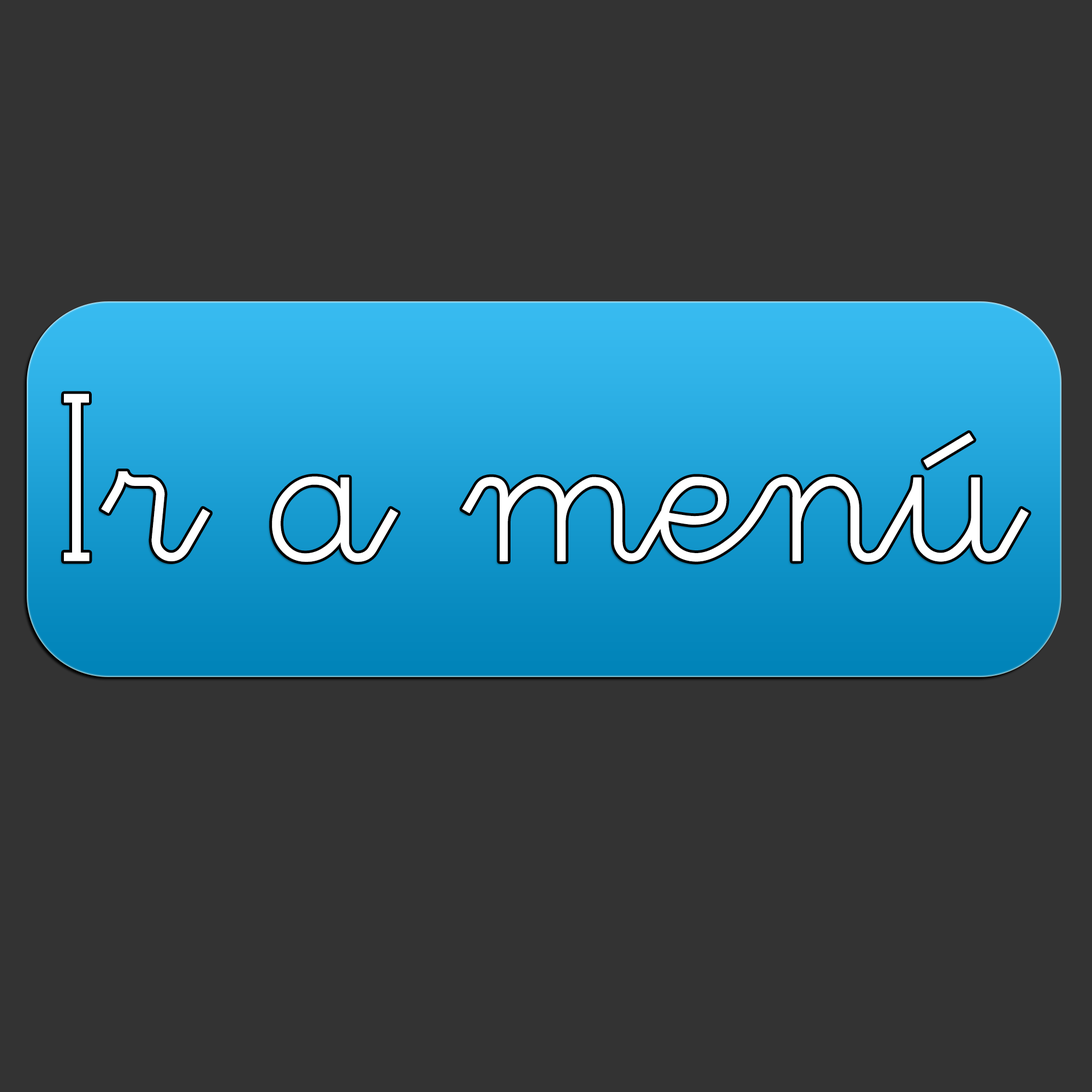
<style>
.page{position:relative;width:1092px;height:1092px;background:#333333}
.page>*{position:absolute;margin:0}
.t1{font:250.3px "Escolar1";color:#ffffff}
</style>
<div class="page">
<p class="t1" style="left:64px;top:394px;width:965px;height:168px">Ir a menú</p>
</div>
